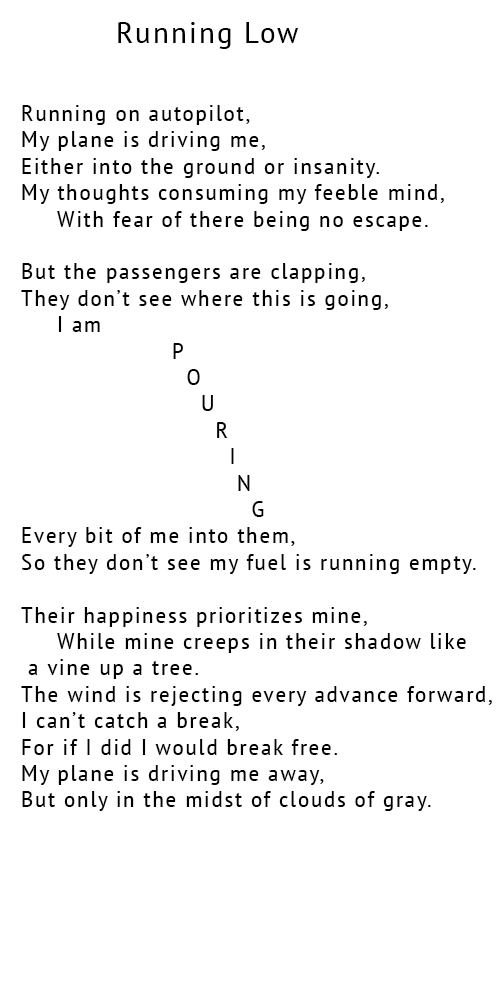
<style>
.page{position:relative;width:500px;height:1000px;background:#ffffff}
.page>*{position:absolute;margin:0}
.t1{font:30px "PTSans-Narrow";letter-spacing:0.06em;color:#000000;scale:1.2 1}
.t2{font:22px "PTSans-Narrow";letter-spacing:0.06em;color:#000000;scale:1.2 1}
.t3{font:20px "PTSans-Narrow";letter-spacing:0.06em;color:#000000;scale:1.2 1}
</style>
<div class="page">
<p class="t1" style="left:118px;top:22px;width:181px;height:27px">Running Low</p>
<p class="t2" style="left:21px;top:105px;width:471px;height:706px"><span class="t3"><br></span>Running on autopilot,<br>My plane is driving me,<br>Either into the ground or insanity.<br>My thoughts consuming my feeble mind,<br> With fear of there being no escape.<br><br>But the passengers are clapping,<br>They don’t see where this is going,<br> I am <br>     P<br>        O<br>           U<br>         R <br>             I<br>               N<br>              G <br>Every bit of me into them,<br>So they don’t see my fuel is running empty.<br><br>Their happiness prioritizes mine, <br> While mine creeps in their shadow like<br> a vine up a tree. <br>The wind is rejecting every advance forward,<br>I can’t catch a break,<br>For if I did I would break free. <br>My plane is driving me away, <br>But only in the midst of clouds of gray.</p>
</div>
